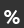
<style>
.page{position:relative;width:24px;height:28px;background:#333333}
.page>*{position:absolute;margin:0}
.t1{font:20px "ProductSans-Bold";color:#ffffff}
</style>
<div class="page">
<p class="t1" style="left:4px;top:10px;width:16px;height:14px">%</p>
</div>
